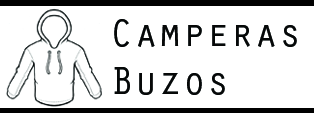
<style>
.page{position:relative;width:314px;height:113px;background:#ffffff}
.page>*{position:absolute;margin:0}
.t1{font:40px "OratorStd";color:#060808}
</style>
<div class="page">
<p class="t1" style="left:114px;top:19px;width:183px;height:76px">Camperas<br>Buzos</p>
</div>
